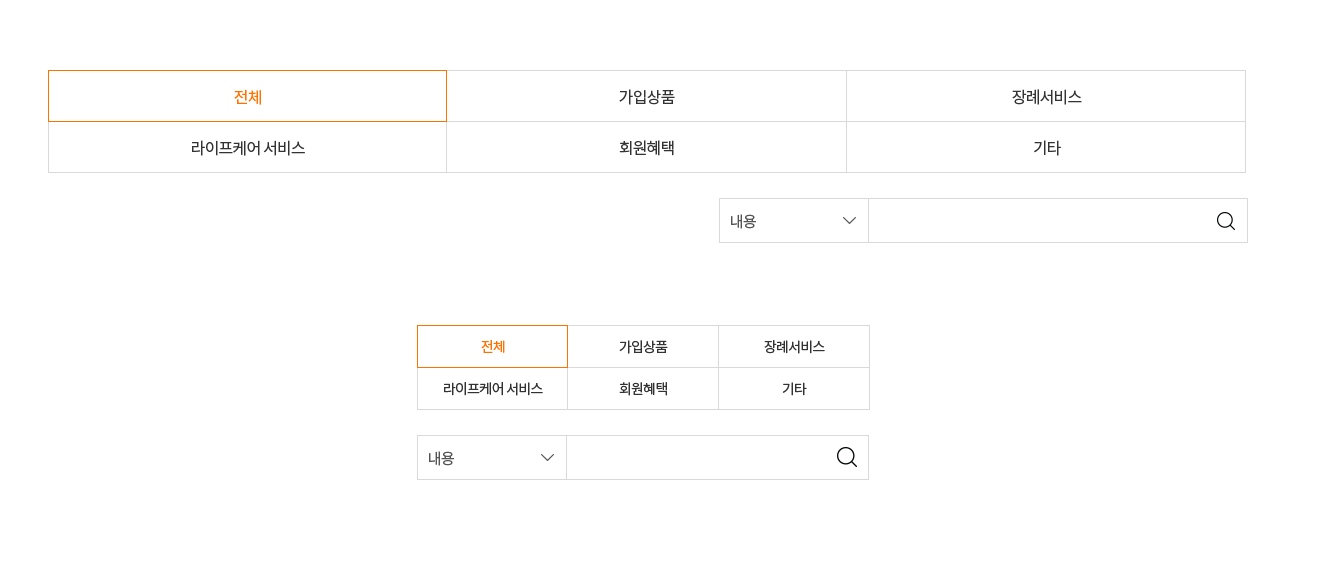
<style>
.page{position:relative;width:1334px;height:579px;background:#ffffff}
.page>*{position:absolute;margin:0}
.t1{font:16px "NotoSansKR-Regular";letter-spacing:-0.05em;color:#ff7200}
.t2{font:16px "NotoSansKR-Regular";letter-spacing:-0.05em;color:#333333}
.t3{font:15px "NotoSansKR-Regular";letter-spacing:-0.05em;color:#555555}
.t4{font:14px "NotoSansKR-Regular";letter-spacing:-0.05em;color:#ff7200}
.t5{font:14px "NotoSansKR-Regular";letter-spacing:-0.05em;color:#333333}
</style>
<div class="page">
<p class="t1" style="left:234px;top:89px;width:27px;height:16px">전체</p>
<p class="t2" style="left:619px;top:89px;width:56px;height:16px">가입상품</p>
<p class="t2" style="left:1012px;top:89px;width:70px;height:16px">장례서비스</p>
<p class="t2" style="left:192px;top:140px;width:113px;height:16px">라이프케어 서비스</p>
<p class="t2" style="left:619px;top:140px;width:55px;height:16px">회원혜택</p>
<p class="t2" style="left:1034px;top:140px;width:27px;height:16px">기타</p>
<p class="t3" style="left:731px;top:214px;width:25px;height:15px">내용</p>
<p class="t4" style="left:481px;top:340px;width:24px;height:13px">전체</p>
<p class="t5" style="left:619px;top:340px;width:49px;height:14px">가입상품</p>
<p class="t5" style="left:764px;top:340px;width:61px;height:14px">장례서비스</p>
<p class="t5" style="left:444px;top:382px;width:99px;height:14px">라이프케어 서비스</p>
<p class="t5" style="left:619px;top:382px;width:48px;height:14px">회원혜택</p>
<p class="t5" style="left:782px;top:382px;width:25px;height:14px">기타</p>
<p class="t3" style="left:429px;top:451px;width:25px;height:15px">내용</p>
</div>
